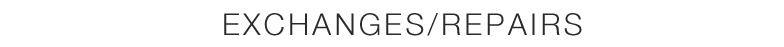
<style>
.page{position:relative;width:784px;height:47px;background:#ffffff}
.page>*{position:absolute;margin:0}
.t1{font:30px "HelveticaNeue-Light";letter-spacing:0.11em;color:#2a2a2a}
</style>
<div class="page">
<p class="t1" style="left:224px;top:13px;width:358px;height:23px">EXCHANGES/REPAIRS</p>
</div>
